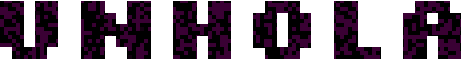
<style>
.page{position:relative;width:461px;height:59px;background:#ffffff}
.page>*{position:absolute;margin:0}
.t1{font:92px "Silkscreen-Bold"}
</style>
<div class="page">
<p class="t1" style="left:0px;top:1px;width:461px;height:58px">UNHOLA</p>
</div>
